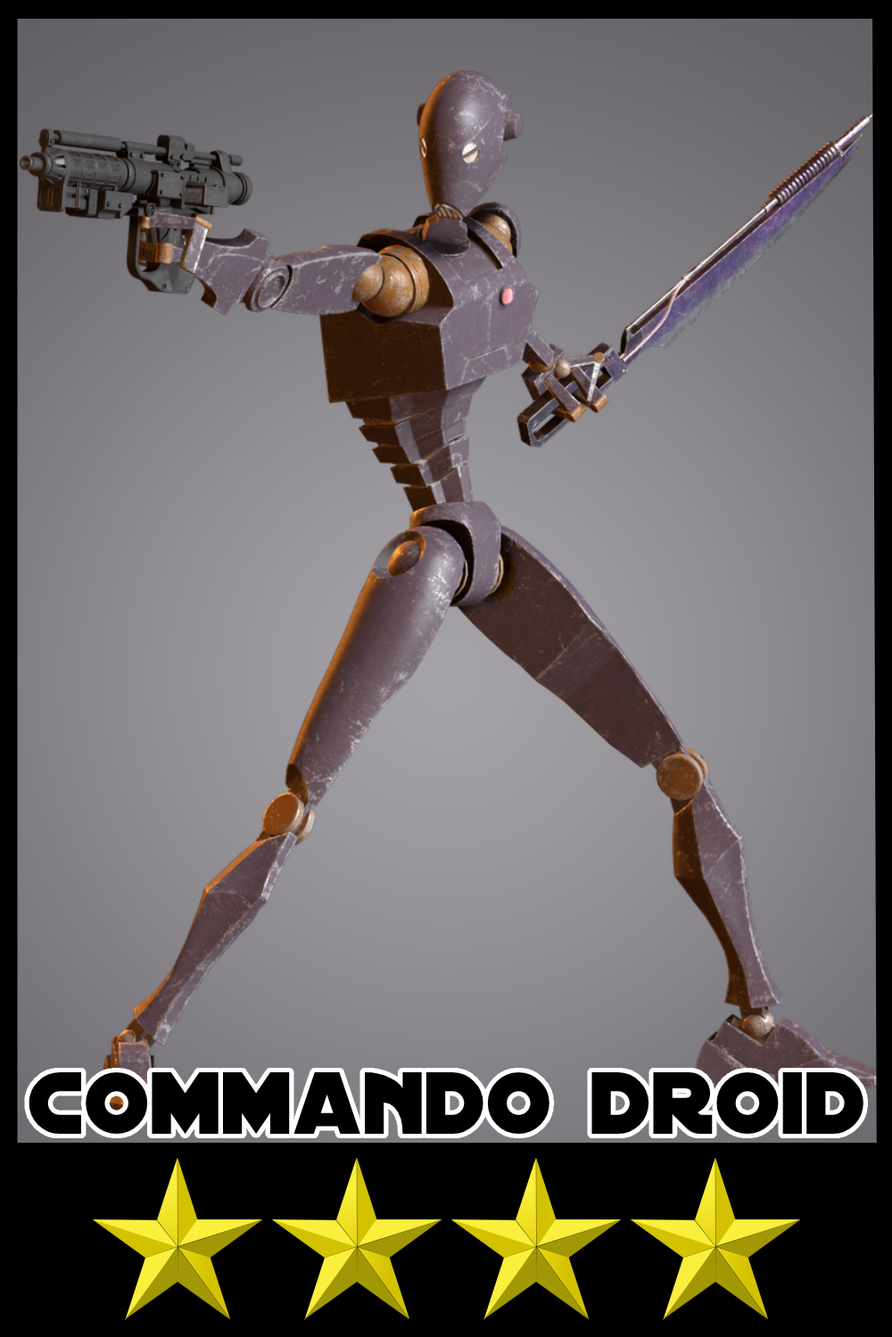
<style>
.page{position:relative;width:892px;height:1337px}
.page>*{position:absolute;margin:0}
.t1{font:94.5px "DistantGalaxy";color:#000000}
</style>
<div class="page">
<p class="t1" style="left:29px;top:1073px;width:834px;height:61px">Commando droid</p>
</div>
